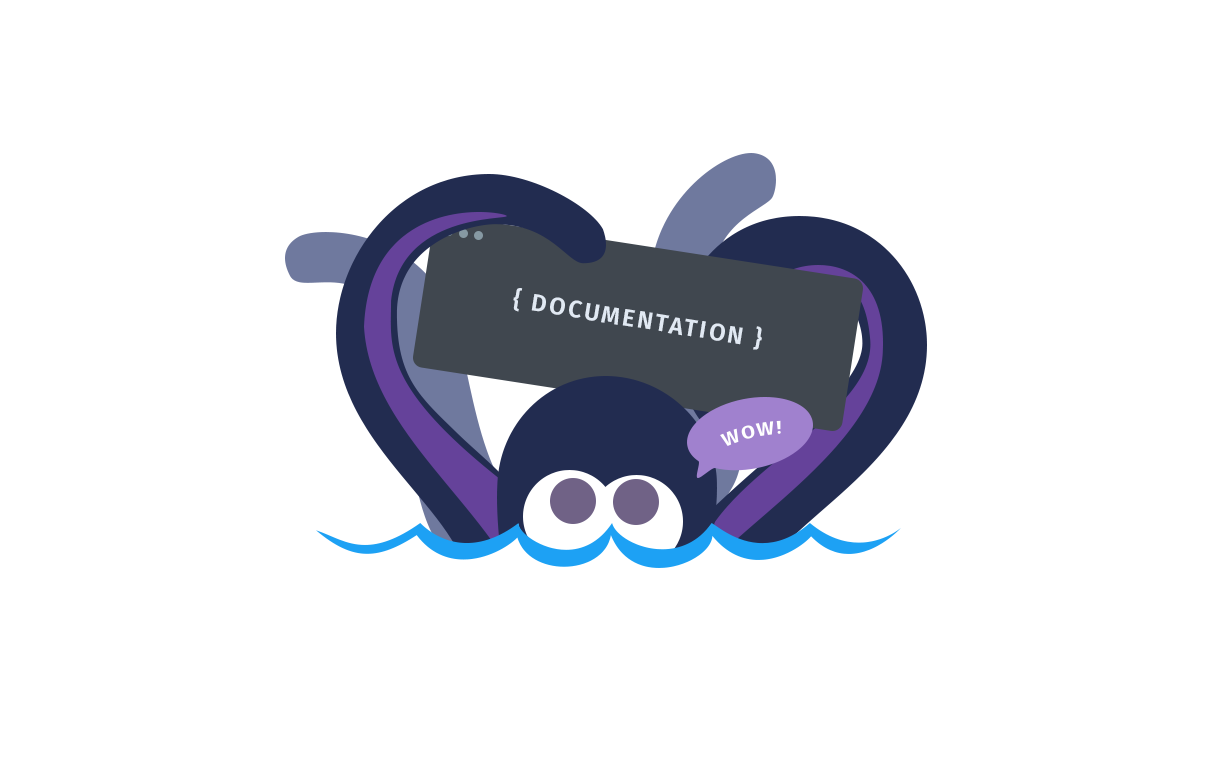
<style>
.page{position:relative;width:1212px;height:782px;background:#ffffff}
.page>*{position:absolute;margin:0}
.t1{font:24px "FiraSans-SemiBold";letter-spacing:0.1em;color:#e1e9f3}
.t2{font:18px "FiraSans-SemiBold";letter-spacing:0.1em;color:#ffffff}
</style>
<div class="page">
<p class="t1" style="left:513px;top:288px;width:249px;height:62px;rotate:9deg">{ DOCUMENTATION }</p>
<p class="t2" style="left:720px;top:420px;width:61px;height:26px;rotate:-12deg">WOW!</p>
</div>
